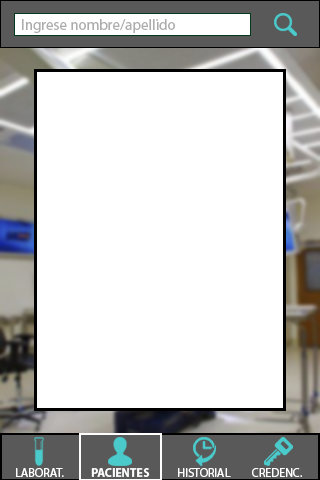
<style>
.page{position:relative;width:320px;height:480px;background:#ffffff}
.page>*{position:absolute;margin:0}
.t1{font:15px "MyriadPro-Regular";color:#acacac}
.t2{font:12px "MyriadPro-Regular";color:#ffffff}
.t3{font:12px "MyriadPro-Bold";color:#ffffff}
.t4{font:12px "MyriadPro-Regular";color:#fefefe}
</style>
<div class="page">
<p class="t1" style="left:22px;top:19px;width:153px;height:14px">Ingrese nombre/apellido</p>
<p class="t2" style="left:16px;top:468px;width:48px;height:9px">LABORAT.</p>
<p class="t3" style="left:91px;top:468px;width:59px;height:9px">PACIENTES</p>
<p class="t4" style="left:178px;top:468px;width:53px;height:9px">HISTORIAL</p>
<p class="t2" style="left:252px;top:468px;width:50px;height:9px">CREDENC.</p>
</div>
